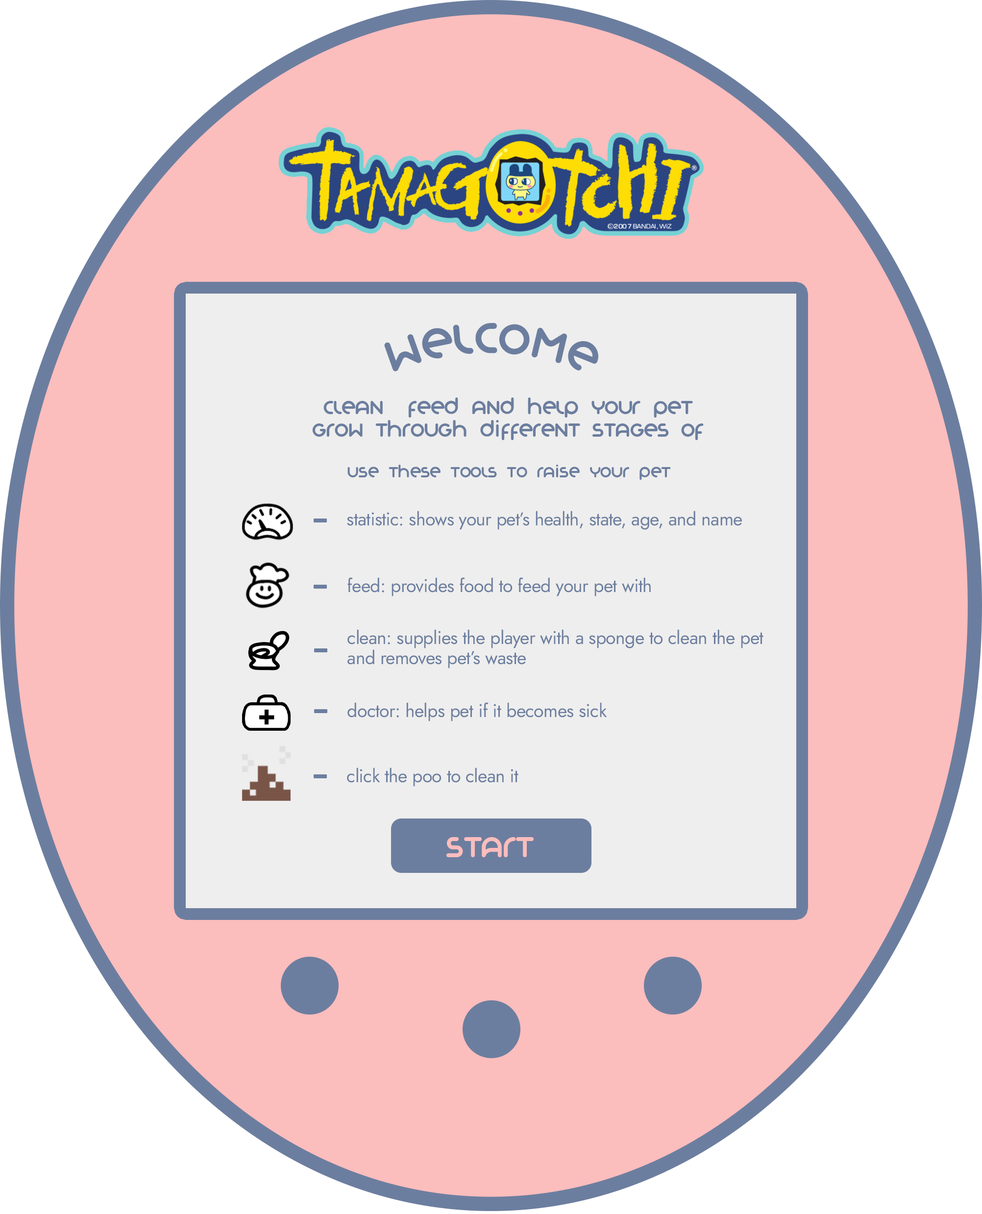
<style>
.page{position:relative;width:982px;height:1214px;background:#fcbdbd}
.page>*{position:absolute;margin:0}
.t1{font:47px "Organocoloredversionat:logomagazin.comorgano-font";letter-spacing:-0.02em;color:#6c7e9f}
.t2{font:20.4px/22.5px "Organocoloredversionat:logomagazin.comorgano-font";letter-spacing:-0.02em;color:#6c7e9f}
.t3{font:16.3px "Organocoloredversionat:logomagazin.comorgano-font";letter-spacing:-0.02em;color:#6c7e9f}
.t4{font:18.4px "Jost-Regular";letter-spacing:-0.02em;color:#6c7e9f}
.t5{font:18.4px/20.4px "Jost-Regular";letter-spacing:-0.02em;color:#6c7e9f}
.t6{font:30.6px "Organocoloredversionat:logomagazin.comorgano-font";letter-spacing:-0.02em;color:#fcbdbd}
</style>
<div class="page">
<p class="t1" style="left:384px;top:323px;width:214px;height:49px">WelCome</p>
<p class="t2" style="left:312px;top:397px;width:392px;height:43px;text-align:center">Clean, feed and help your pet grow through different stages of life</p>
<p class="t3" style="left:347px;top:465px;width:324px;height:15px">use these tools to raise your pet!</p>
<p class="t4" style="left:347px;top:511px;width:395px;height:19px">statistic: shows your pet’s health, state, age, and name</p>
<p class="t4" style="left:347px;top:577px;width:304px;height:19px">feed: provides food to feed your pet with</p>
<p class="t5" style="left:347px;top:629px;width:417px;height:40px">clean: supplies the player with a sponge to clean the pet and removes pet’s waste</p>
<p class="t4" style="left:347px;top:702px;width:260px;height:19px">doctor: helps pet if it becomes sick</p>
<p class="t4" style="left:347px;top:768px;width:172px;height:19px">click the poo to clean it</p>
<p class="t6" style="left:447px;top:837px;width:87px;height:20px">START</p>
</div>
